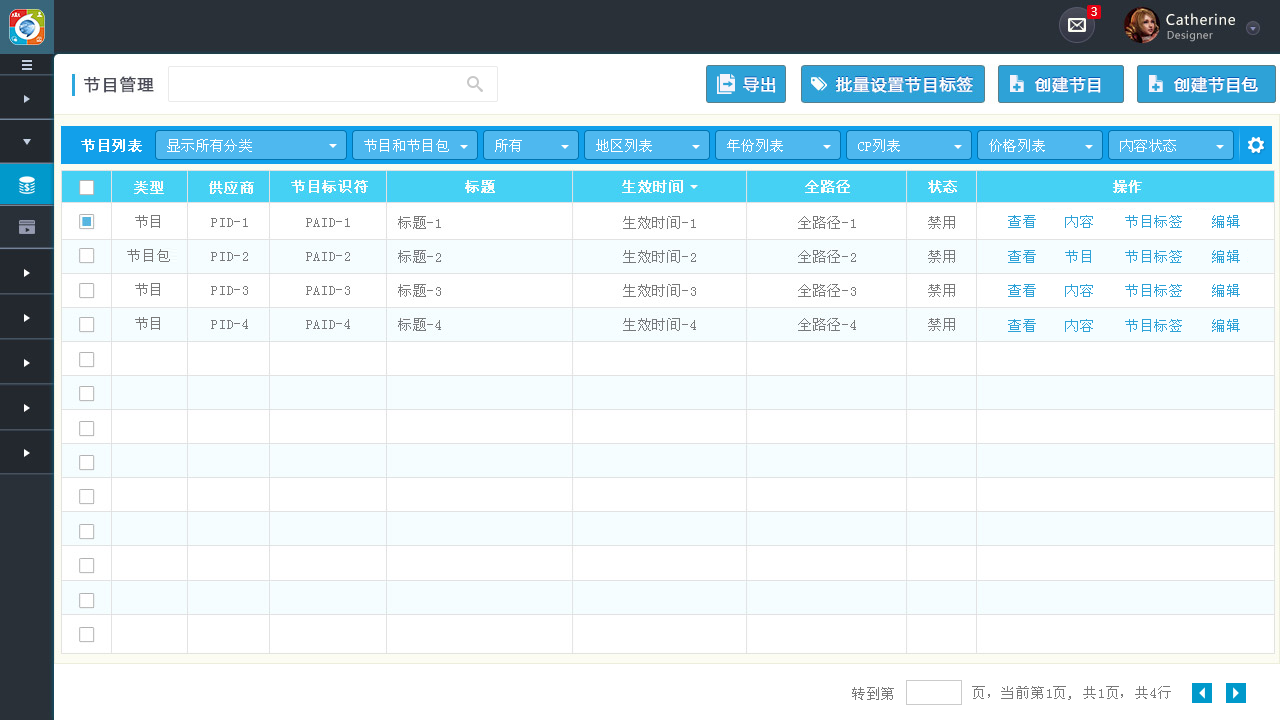
<style>
.page{position:relative;width:1280px;height:720px;background:#ffffff}
.page>*{position:absolute;margin:0}
.t1{font:16px "MicrosoftYaHei";letter-spacing:0.05em;color:#ffffff;font-weight:bold}
.t2{font:16px "MicrosoftYaHei";letter-spacing:0.01em;color:#ffffff;font-weight:bold}
.t3{font:14px "SimSun";letter-spacing:0.05em;color:#ffffff;font-weight:bold}
.t4{font:14px "SimSun";letter-spacing:0.025em;color:#ffffff}
.t5{font:14px/34px "SimSun";letter-spacing:0.05em;color:#797979}
.t6{font:14px "SimSun";letter-spacing:0.05em;color:#2ea2d7}
.t7{font:14px "SimSun";letter-spacing:0.05em;color:#797979}
</style>
<div class="page">
<p class="t1" style="left:743px;top:77px;width:33px;height:16px">导出</p>
<p class="t1" style="left:1035px;top:76px;width:66px;height:17px">创建<span class="t2">节目</span></p>
<p class="t2" style="left:1174px;top:76px;width:84px;height:17px"><span class="t1">创建</span>节目包</p>
<p class="t3" style="left:81px;top:139px;width:61px;height:13px">节目列表</p>
<p class="t4" style="left:167px;top:139px;width:85px;height:13px">显示所有分类</p>
<p class="t4" style="left:364px;top:139px;width:85px;height:13px">节目和节目包</p>
<p class="t4" style="left:495px;top:139px;width:27px;height:13px">所有</p>
<p class="t4" style="left:596px;top:139px;width:56px;height:13px">地区列表</p>
<p class="t4" style="left:727px;top:139px;width:56px;height:13px">年份列表</p>
<p class="t4" style="left:858px;top:139px;width:42px;height:13px">CP列表</p>
<p class="t4" style="left:989px;top:139px;width:56px;height:13px">价格列表</p>
<p class="t4" style="left:1120px;top:139px;width:56px;height:13px">内容状态</p>
<p class="t5" style="left:127px;top:215px;width:43px;height:115px;text-align:center">节目<br>节目包<br>节目<br>节目</p>
<p class="t6" style="left:1008px;top:215px;width:28px;height:13px">查看</p>
<p class="t6" style="left:1065px;top:215px;width:28px;height:13px">内容</p>
<p class="t6" style="left:1125px;top:215px;width:57px;height:13px">节目标签</p>
<p class="t6" style="left:1212px;top:215px;width:28px;height:13px">编辑</p>
<p class="t6" style="left:1008px;top:250px;width:28px;height:13px">查看</p>
<p class="t6" style="left:1065px;top:250px;width:26px;height:13px">节目</p>
<p class="t6" style="left:1125px;top:250px;width:57px;height:13px">节目标签</p>
<p class="t6" style="left:1212px;top:250px;width:28px;height:13px">编辑</p>
<p class="t6" style="left:1008px;top:284px;width:28px;height:13px">查看</p>
<p class="t6" style="left:1065px;top:284px;width:28px;height:13px">内容</p>
<p class="t6" style="left:1125px;top:284px;width:57px;height:13px">节目标签</p>
<p class="t6" style="left:1212px;top:284px;width:28px;height:13px">编辑</p>
<p class="t6" style="left:1008px;top:319px;width:28px;height:13px">查看</p>
<p class="t6" style="left:1065px;top:319px;width:28px;height:13px">内容</p>
<p class="t6" style="left:1125px;top:319px;width:57px;height:13px">节目标签</p>
<p class="t6" style="left:1212px;top:319px;width:28px;height:13px">编辑</p>
<p class="t7" style="left:852px;top:687px;width:42px;height:13px">转到第</p>
<p class="t7" style="left:972px;top:686px;width:199px;height:14px">页，当前第1页, 共1页，共4行</p>
</div>
